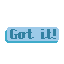
<style>
.page{position:relative;width:64px;height:64px;background:#ffffff}
.page>*{position:absolute;margin:0}
.t1{font:14px "Superscript";color:#3281a2}
</style>
<div class="page">
<p class="t1" style="left:10px;top:29px;width:46px;height:10px">Got it!</p>
</div>
